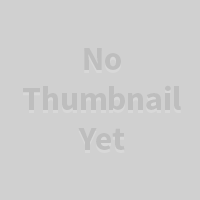
<style>
.page{position:relative;width:200px;height:200px;background:#d0d0d0}
.page>*{position:absolute;margin:0}
.t1{font:33.6px "SourceSansPro-Bold";color:#bdbdbd}
</style>
<div class="page">
<p class="t1" style="left:23px;top:48px;width:158px;height:102px;text-align:center">No<br>Thumbnail<br>Yet</p>
</div>
